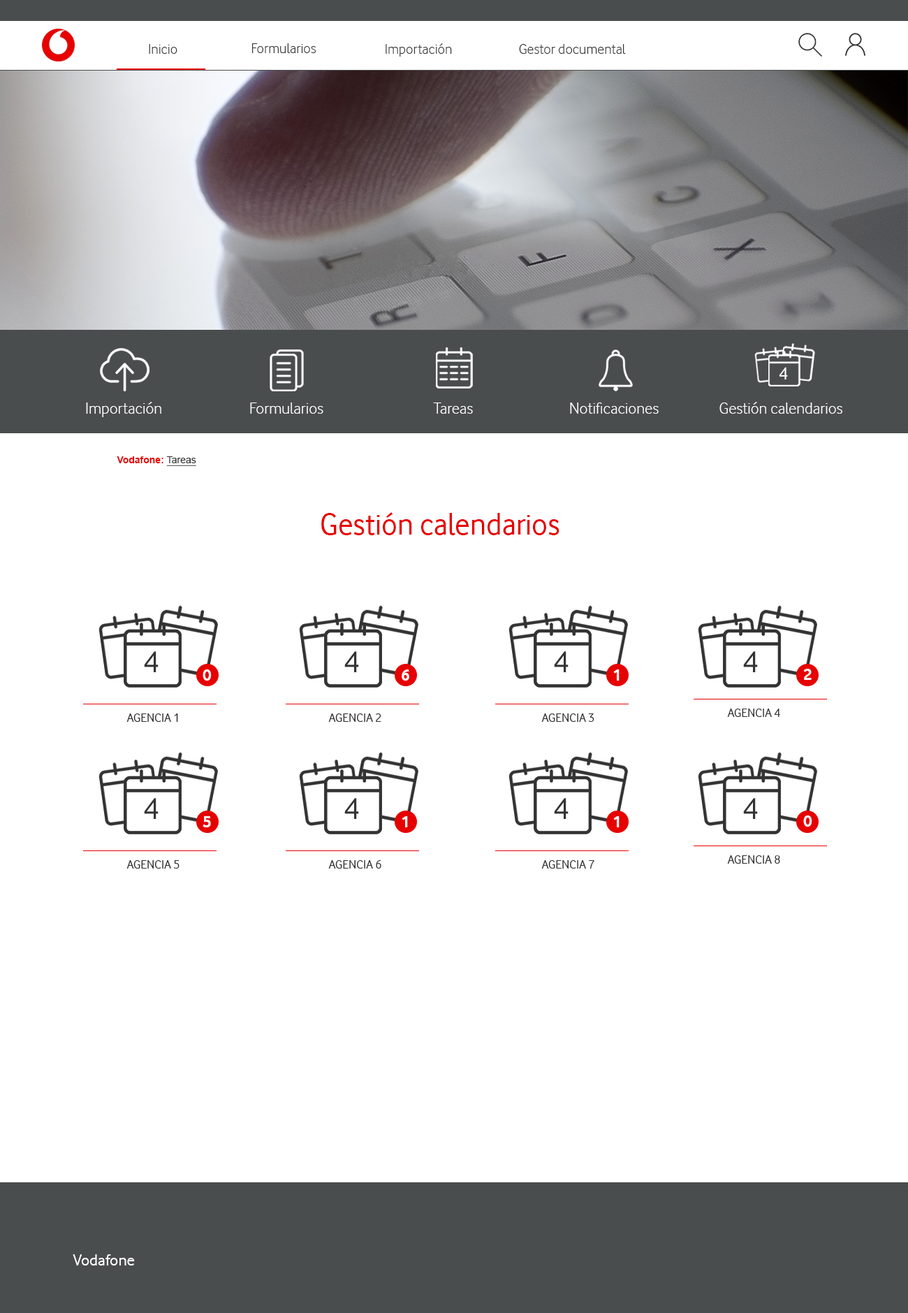
<style>
.page{position:relative;width:908px;height:1313px;background:#ffffff}
.page>*{position:absolute;margin:0}
.t1{font:14.7px "VodafoneLt-Regular";color:#333333}
.t2{font:18.2px "VodafoneRg-Regular";color:#ffffff}
.t3{font:16.8px "VodafoneLt-Regular";color:#ffffff}
.t4{font:9.8px "Arial-BoldMT";color:#e60000}
.t5{font:9.8px "ArialMT";color:#333333;text-decoration:underline}
.t6{font:31.4px "VodafoneRg-Regular";color:#e60000}
.t7{font:16.8px "VodafoneRg-Regular";color:#ffffff}
</style>
<div class="page">
<p class="t1" style="left:149px;top:44px;width:28px;height:10px">Inicio</p>
<p class="t1" style="left:252px;top:43px;width:65px;height:10px">Formularios</p>
<p class="t1" style="left:386px;top:43px;width:66px;height:14px">Importación</p>
<p class="t1" style="left:519px;top:44px;width:107px;height:10px">Gestor documental</p>
<p class="t2" style="left:779px;top:367px;width:9px;height:13px">4</p>
<p class="t3" style="left:86px;top:402px;width:75px;height:15px">Importación</p>
<p class="t3" style="left:720px;top:402px;width:123px;height:12px">Gestión calendarios</p>
<p class="t3" style="left:250px;top:402px;width:73px;height:12px">Formularios</p>
<p class="t3" style="left:433px;top:402px;width:40px;height:12px">Tareas</p>
<p class="t3" style="left:570px;top:402px;width:89px;height:12px">Notificaciones</p>
<p class="t4" style="left:117px;top:456px;width:79px;height:10px">Vodafone: <span class="t5">Tareas</span></p>
<p class="t6" style="left:321px;top:512px;width:239px;height:23px">Gestión calendarios</p>
<p class="t7" style="left:73px;top:1254px;width:62px;height:11px">Vodafone</p>
</div>
